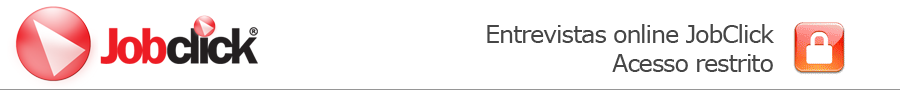
<style>
.page{position:relative;width:900px;height:90px;background:#ffffff}
.page>*{position:absolute;margin:0}
.t1{font:24px "Verdana";letter-spacing:-0.05em;color:#464646}
</style>
<div class="page">
<p class="t1" style="left:487px;top:24px;width:287px;height:48px;text-align:right">Entrevistas online JobClick<br>Acesso restrito</p>
</div>
